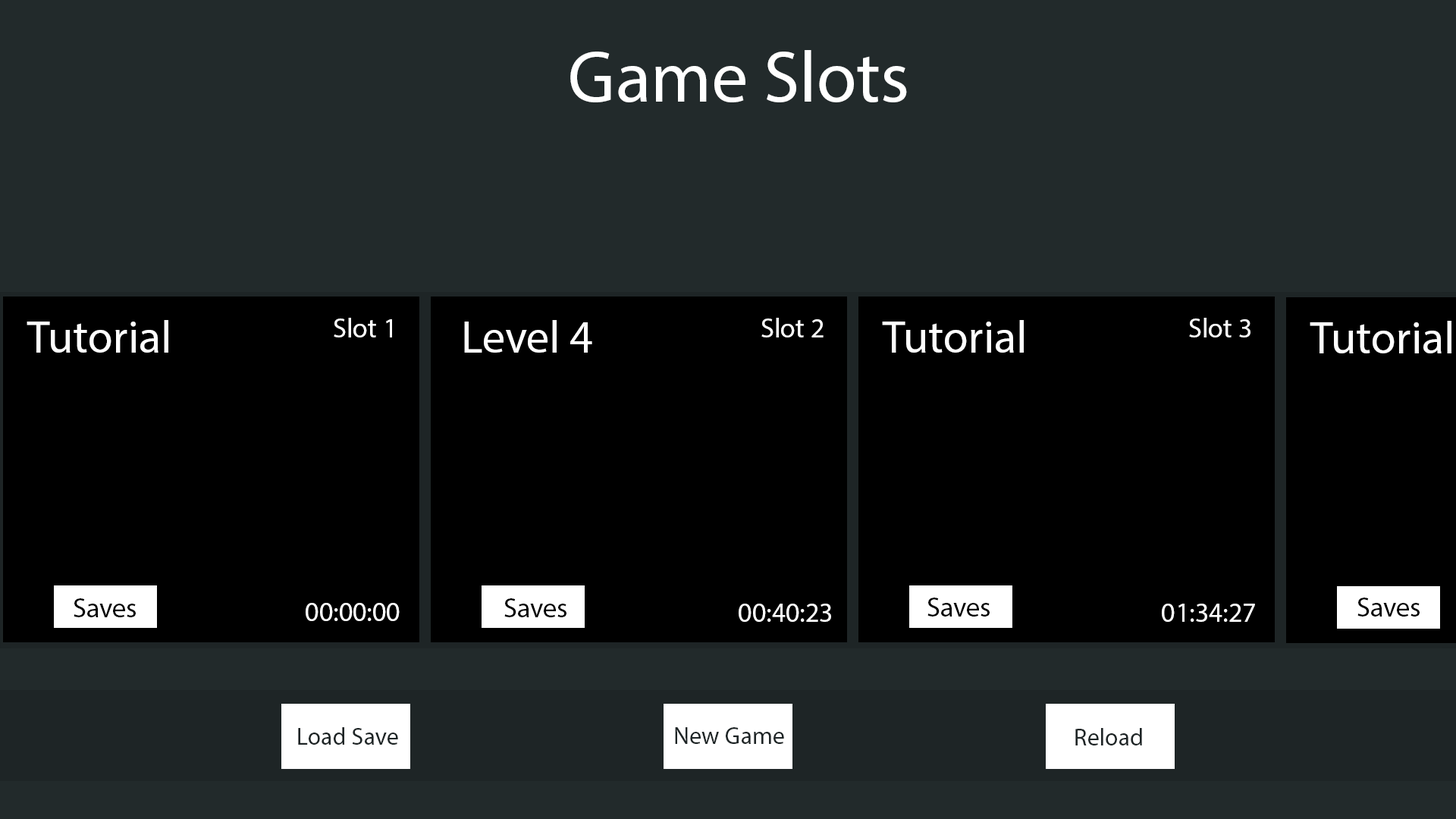
<style>
.page{position:relative;width:1456px;height:819px;background:#222a2b}
.page>*{position:absolute;margin:0}
.t1{font:72.8px "MyriadPro-Regular";color:#ffffff}
.t2{font:27.3px "MyriadPro-Regular";color:#ffffff}
.t3{font:45.5px "MyriadPro-Regular";color:#ffffff}
.t4{font:27.3px "MyriadPro-Regular";color:#000000}
.t5{font:24.3px "MyriadPro-Regular";color:#1e2526}
</style>
<div class="page">
<p class="t1" style="left:570px;top:50px;width:337px;height:52px">Game Slots</p>
<p class="t2" style="left:334px;top:318px;width:58px;height:19px">Slot 1</p>
<p class="t2" style="left:761px;top:318px;width:63px;height:19px">Slot 2</p>
<p class="t2" style="left:1189px;top:318px;width:61px;height:19px">Slot 3</p>
<p class="t3" style="left:27px;top:320px;width:141px;height:33px">Tutorial</p>
<p class="t3" style="left:464px;top:320px;width:128px;height:33px">Level 4</p>
<p class="t3" style="left:882px;top:320px;width:142px;height:33px">Tutorial</p>
<p class="t3" style="left:1310px;top:321px;width:141px;height:32px">Tutorial</p>
<p class="t4" style="left:74px;top:598px;width:62px;height:19px">Saves</p>
<p class="t2" style="left:306px;top:603px;width:94px;height:18px">00:00:00</p>
<p class="t4" style="left:504px;top:598px;width:62px;height:19px">Saves</p>
<p class="t2" style="left:739px;top:604px;width:92px;height:18px">00:40:23</p>
<p class="t4" style="left:927px;top:598px;width:63px;height:19px">Saves</p>
<p class="t2" style="left:1162px;top:604px;width:93px;height:18px">01:34:27</p>
<p class="t4" style="left:1357px;top:598px;width:63px;height:19px">Saves</p>
<p class="t5" style="left:298px;top:727px;width:100px;height:18px">Load Save</p>
<p class="t5" style="left:675px;top:727px;width:109px;height:17px">New Game</p>
<p class="t5" style="left:1075px;top:728px;width:67px;height:17px">Reload</p>
</div>
